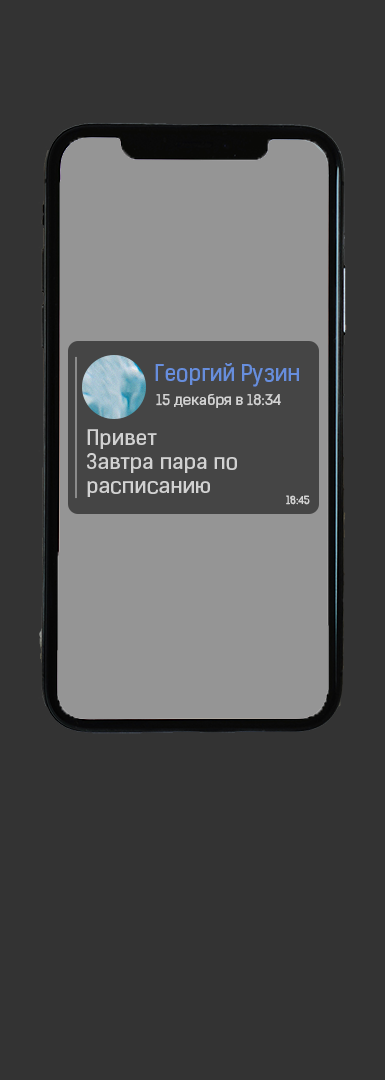
<style>
.page{position:relative;width:385px;height:1080px;background:#333333}
.page>*{position:absolute;margin:0}
.t1{font:38.8px "KelsonSans-RegularRU";color:#678edd}
.t2{font:24px "KelsonSans-RegularRU";color:#d2d2d2;scale:1.11 1}
.t3{font:34.5px/24px "KelsonSans-RegularRU";color:#d2d2d2;scale:1.11 1}
.t4{font:18.4px "KelsonSans-RegularRU";color:#d2d2d2}
</style>
<div class="page">
<p class="t1" style="left:155px;top:363px;width:144px;height:24px">Георгий Рузин</p>
<p class="t2" style="left:156px;top:394px;width:125px;height:14px">15 декабря в 18:34</p>
<p class="t3" style="left:87px;top:429px;width:150px;height:68px">Привет<br>Завтра пара по <br>расписанию</p>
<p class="t4" style="left:286px;top:495px;width:24px;height:10px">18:45</p>
</div>
